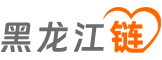
<style>
.page{position:relative;width:162px;height:60px;background:#ffffff}
.page>*{position:absolute;margin:0}
.t1{font:35.2px "DingTalk-JinBuTi";color:#6c6c6c;font-weight:bold}
</style>
<div class="page">
<p class="t1" style="left:1px;top:21px;width:103px;height:32px">黑龙江</p>
</div>
